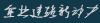
<style>
.page{position:relative;width:100px;height:23px;background:#123949}
.page>*{position:absolute;margin:0}
.t1{font:12px "-";color:#cfcdcd;font-weight:bold;font-style:italic;scale:1.1 1}
</style>
<div class="page">
<p class="t1" style="left:3px;top:4px;width:96px;height:14px">企业建站新动力</p>
</div>
